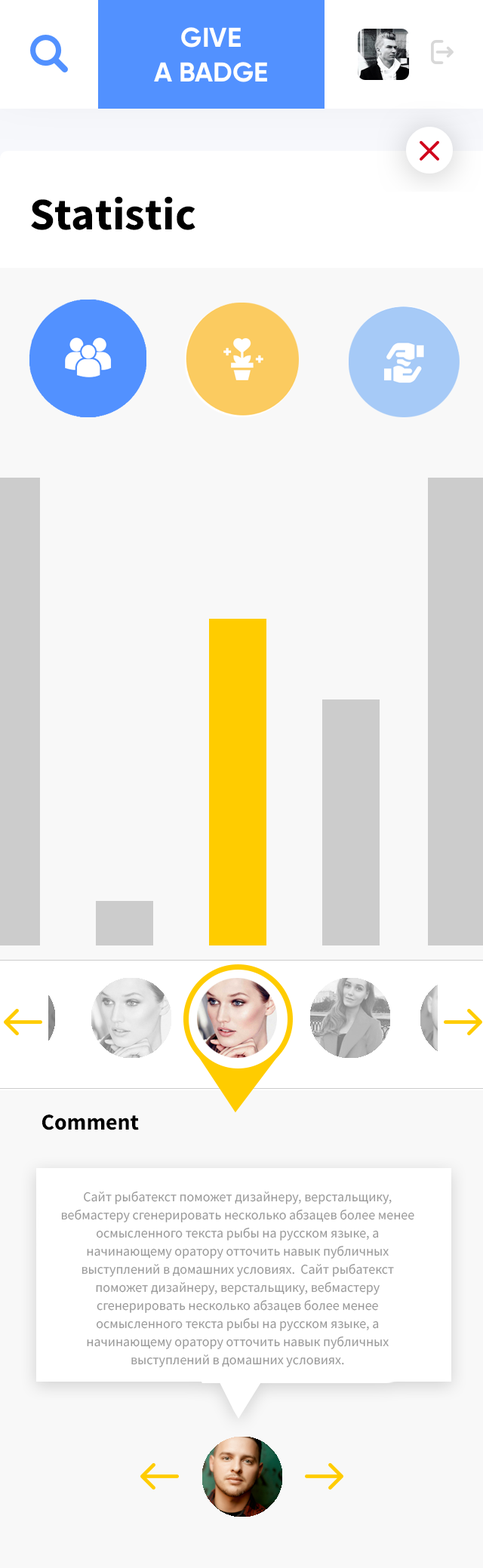
<style>
.page{position:relative;width:483px;height:1568px;background:#f8f8f8}
.page>*{position:absolute;margin:0}
.t1{font:45.3px "SourceSansPro-Bold";color:#000000}
.t2{font:22.6px "SourceSansPro-Bold";color:#000000}
.t3{font:13.6px/18.1px "SourceSansPro-Regular";color:#999999}
</style>
<div class="page">
<p class="t1" style="left:31px;top:196px;width:164px;height:34px">Statistic</p>
<p class="t2" style="left:42px;top:1115px;width:97px;height:15px">Comment</p>
<p class="t3" style="left:61px;top:1191px;width:353px;height:176px;text-align:center">Сайт рыбатекст поможет дизайнеру, верстальщику, вебмастеру сгенерировать несколько абзацев более менее осмысленного текста рыбы на русском языке, а начинающему оратору отточить навык публичных выступлений в домашних условиях.  Сайт рыбатекст поможет дизайнеру, верстальщику, вебмастеру сгенерировать несколько абзацев более менее осмысленного текста рыбы на русском языке, а начинающему оратору отточить навык публичных выступлений в домашних условиях.</p>
</div>
